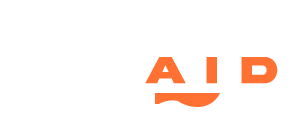
<style>
.page{position:relative;width:296px;height:132px;background:#ffffff}
.page>*{position:absolute;margin:0}
.t1{font:39.4px "AkiraExpanded-SuperBold";letter-spacing:0.5em;color:#ff7033;font-weight:bold}
.t2{font:39.4px "AkiraExpanded-SuperBold";letter-spacing:0.5em;color:#ffffff;font-weight:bold}
</style>
<div class="page">
<p class="t1" style="left:36px;top:57px;width:242px;height:27px"><span class="t2">BL</span>AID</p>
</div>
